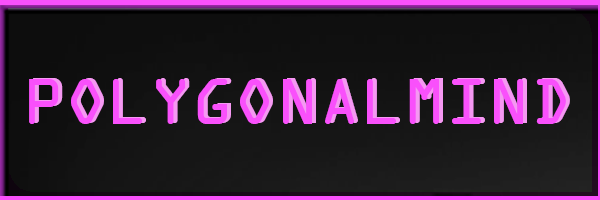
<style>
.page{position:relative;width:600px;height:200px}
.page>*{position:absolute;margin:0}
.t1{font:70.1px "OCRAExtended"}
.t2{font:70.1px "OCRAExtended";color:#f950fb}
</style>
<div class="page">
<p class="t1" style="left:33px;top:78px;width:537px;height:45px">POLYGONALMIND</p>
<p class="t2" style="left:29px;top:79px;width:537px;height:45px">POLYGONALMIND</p>
</div>
